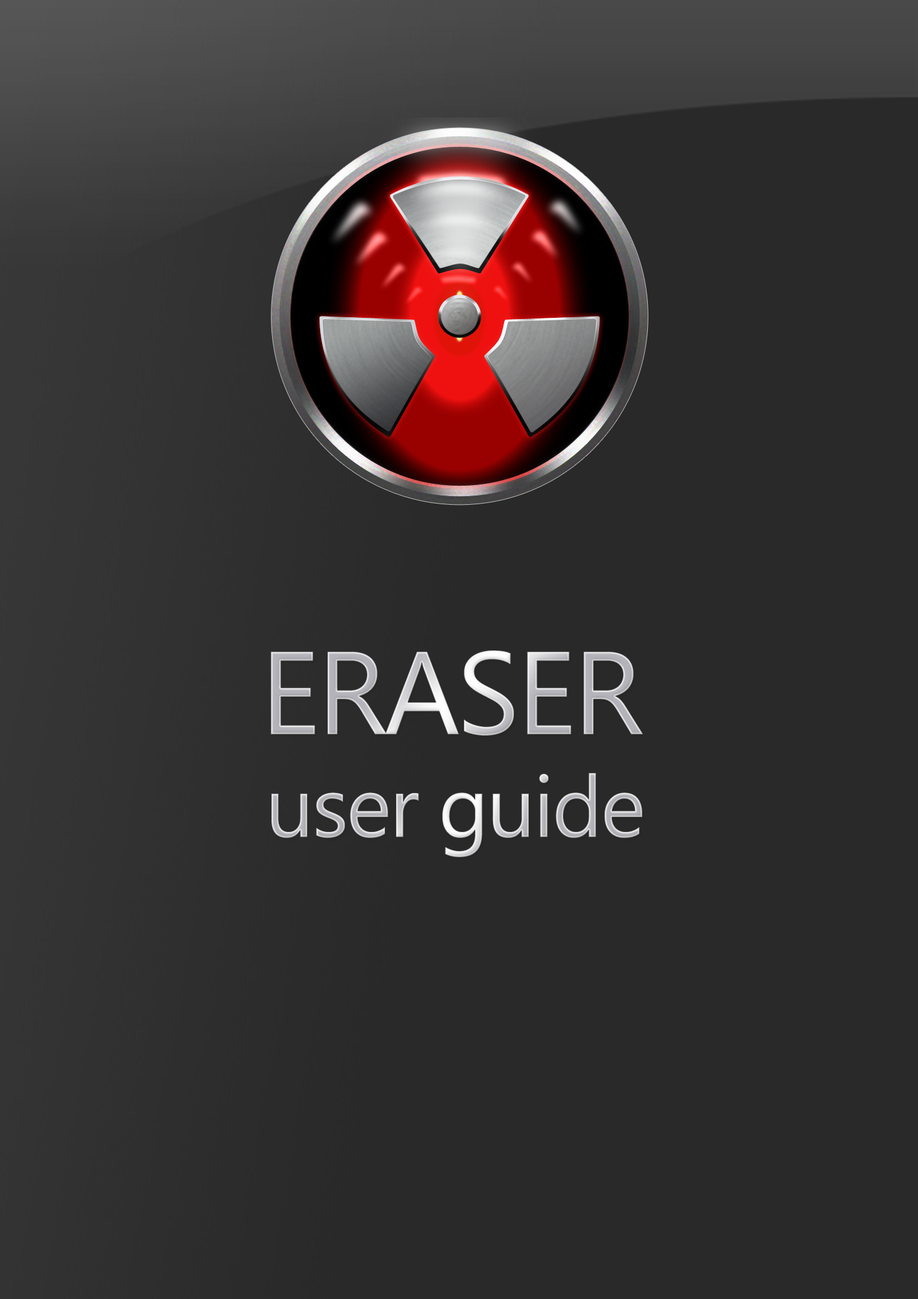
<style>
.page{position:relative;width:918px;height:1299px;background:#292929}
.page>*{position:absolute;margin:0}
.t1{font:117.5px "SegoeUI";letter-spacing:-0.025em}
.t2{font:86px "SegoeUI";letter-spacing:-0.025em}
</style>
<div class="page">
<p class="t1" style="left:271px;top:650px;width:372px;height:85px">ERASER</p>
<p class="t2" style="left:271px;top:772px;width:371px;height:85px">user guide</p>
</div>
